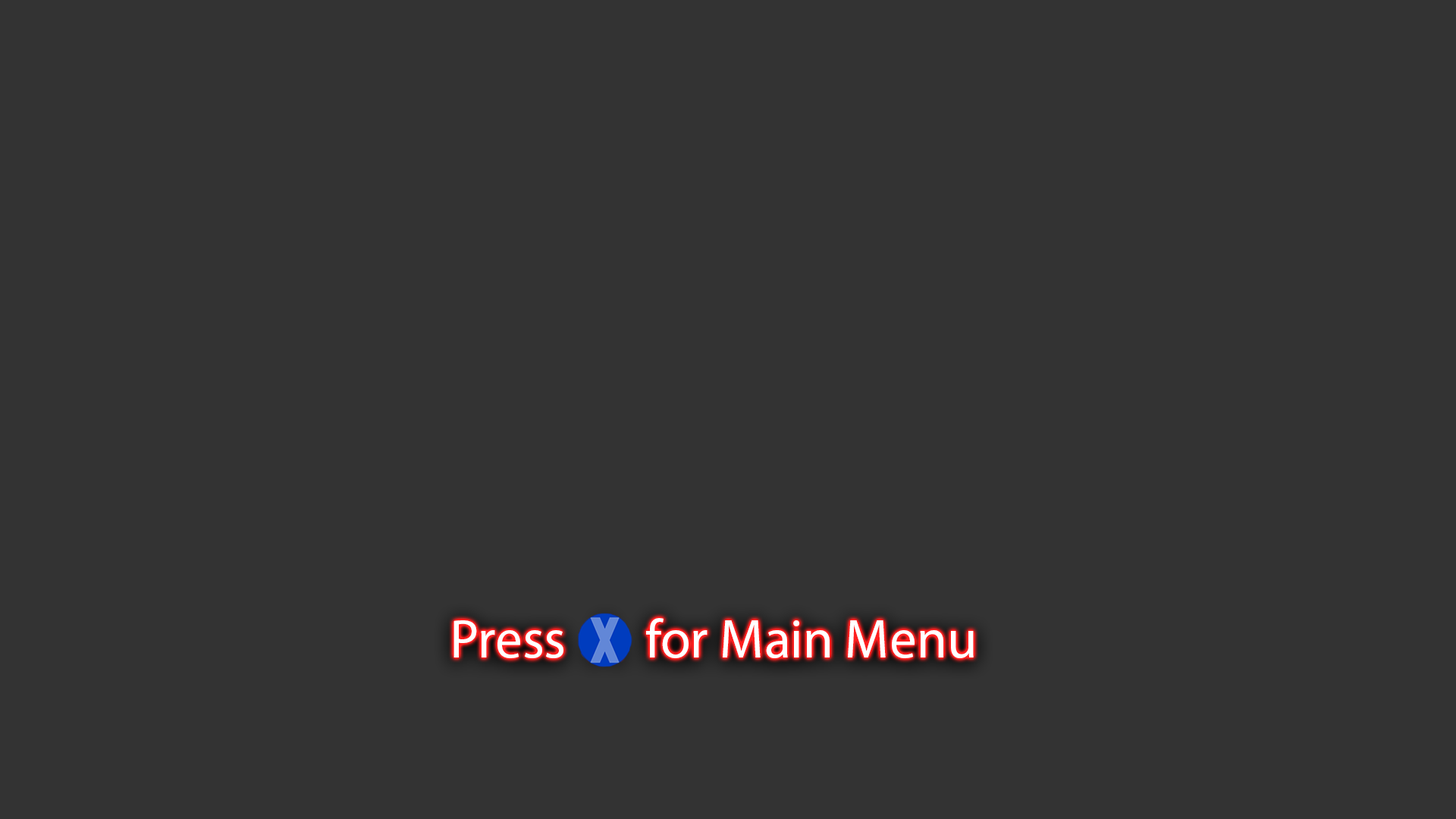
<style>
.page{position:relative;width:1456px;height:819px;background:#333333}
.page>*{position:absolute;margin:0}
.t1{font:54.6px "MyriadPro-Regular";color:#ffffff}
</style>
<div class="page">
<p class="t1" style="left:453px;top:618px;width:521px;height:40px">Press  A  for Main Menu</p>
</div>
